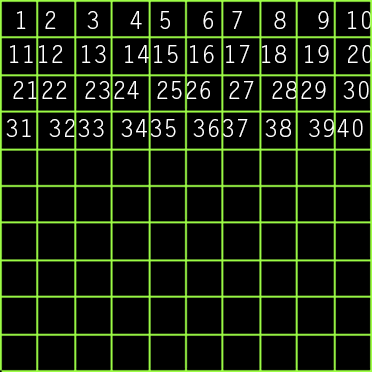
<style>
.page{position:relative;width:372px;height:372px;background:#000000}
.page>*{position:absolute;margin:0}
.t1{font:24px "LetterGothicStd";color:#ffffff}
</style>
<div class="page">
<p class="t1" style="left:17px;top:11px;width:355px;height:18px">1 2  3  4 5  6 7  8  9 10</p>
<p class="t1" style="left:10px;top:45px;width:362px;height:18px">1112 13 1415 16 17 18 19 20</p>
<p class="t1" style="left:13px;top:81px;width:356px;height:18px">2122 2324 2526 27 2829 30</p>
<p class="t1" style="left:6px;top:119px;width:357px;height:18px">31 3233 3435 3637 38 3940</p>
</div>
